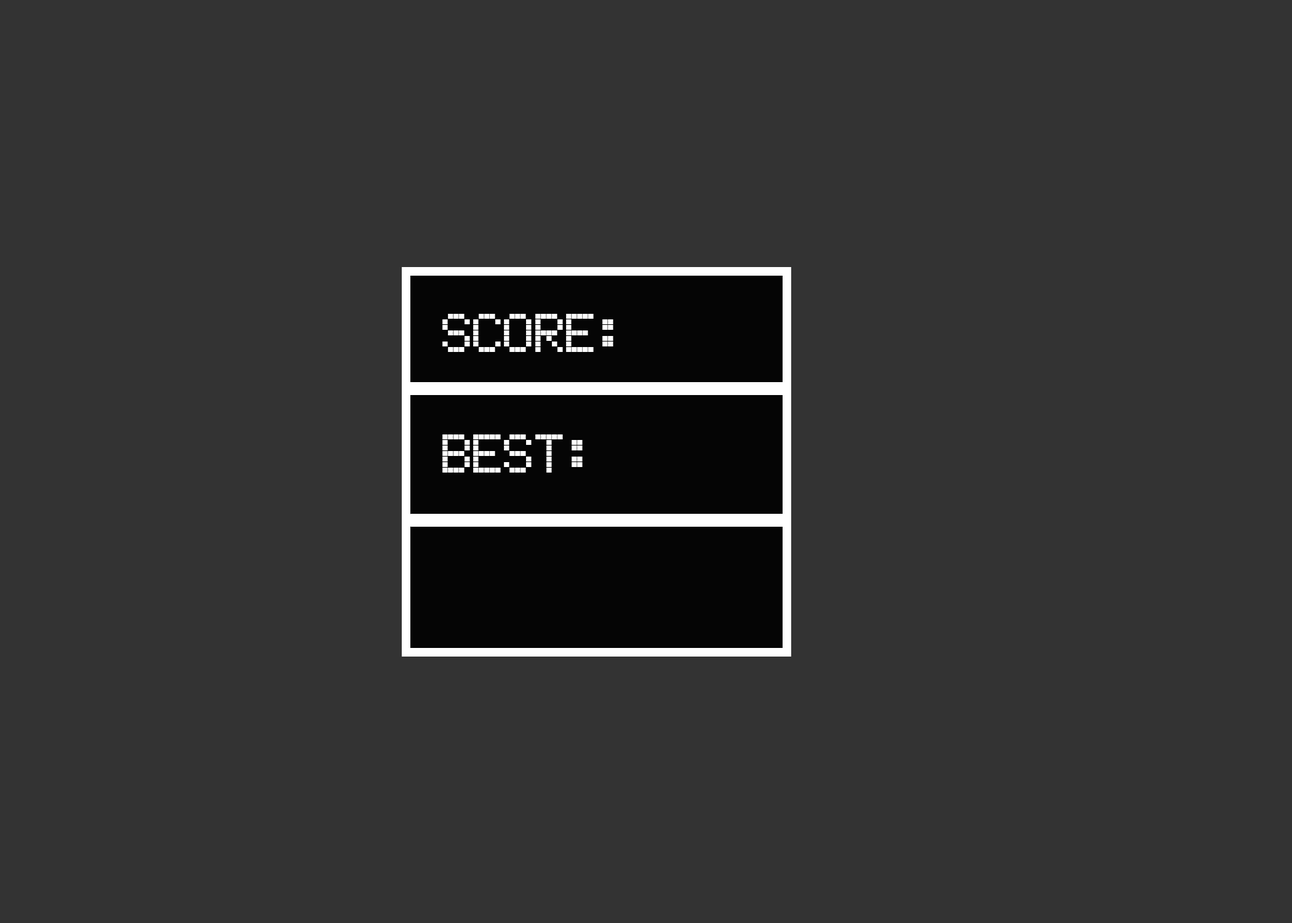
<style>
.page{position:relative;width:1292px;height:923px;background:#333333}
.page>*{position:absolute;margin:0}
.t1{font:51.3px "ElectronicHighwaySign";letter-spacing:-0.01em;color:#ffffff}
</style>
<div class="page">
<p class="t1" style="left:442px;top:314px;width:171px;height:38px">SCORE:</p>
<p class="t1" style="left:442px;top:434px;width:141px;height:39px">BEST:</p>
</div>
